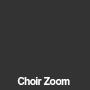
<style>
.page{position:relative;width:90px;height:90px;background:#333333}
.page>*{position:absolute;margin:0}
.t1{font:11px "CoolveticaRg-Regular";color:#ffffff}
</style>
<div class="page">
<p class="t1" style="left:17px;top:77px;width:53px;height:8px">Choir Zoom</p>
</div>
